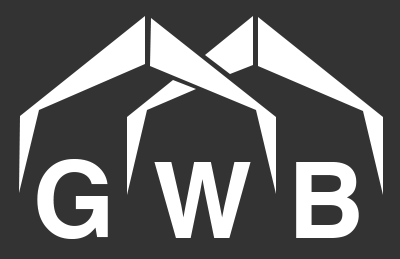
<style>
.page{position:relative;width:400px;height:259px;background:#333333}
.page>*{position:absolute;margin:0}
.t1{font:105px "Helvetica-Bold";color:#ffffff}
</style>
<div class="page">
<p class="t1" style="left:37px;top:159px;width:71px;height:80px">G</p>
<p class="t1" style="left:154px;top:162px;width:97px;height:76px">W</p>
<p class="t1" style="left:296px;top:162px;width:63px;height:76px">B</p>
</div>
